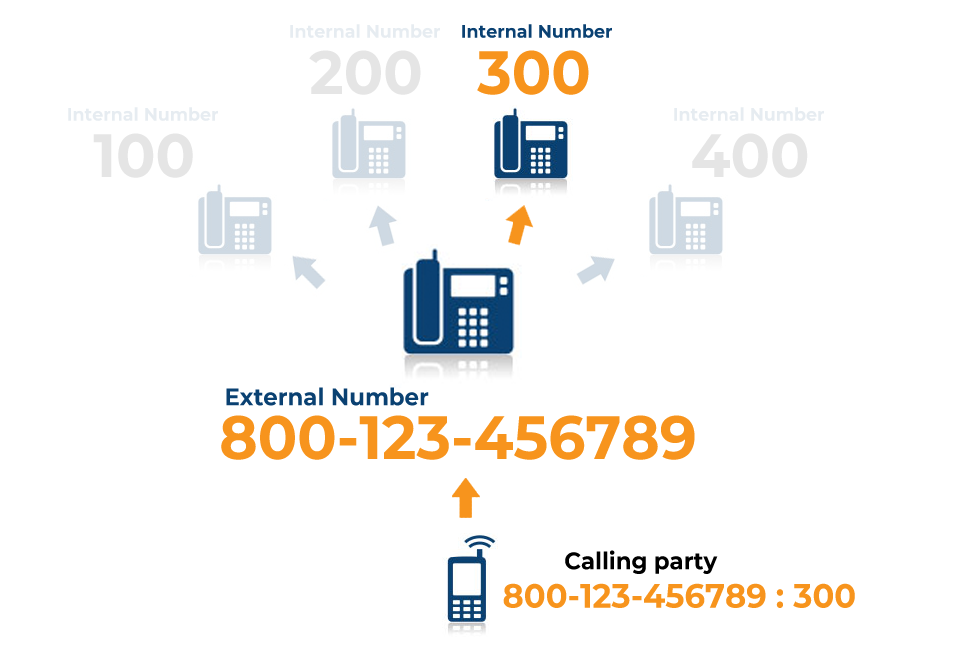
<style>
.page{position:relative;width:960px;height:660px;background:#ffffff}
.page>*{position:absolute;margin:0}
.t1{font:18.3px "Montserrat-Bold";color:#e6ecf1;scale:0.95 1}
.t2{font:18.3px "Montserrat-Bold";color:#0a4172;scale:0.95 1}
.t3{font:61.1px "Montserrat-Bold";color:#e5e5e5;scale:0.95 1}
.t4{font:61.1px "Montserrat-Bold";color:#f7941d;scale:0.95 1}
.t5{font:24px "Montserrat-Bold";color:#0a4172;scale:0.95 1}
.t6{font:24px "Montserrat-Bold";color:#000000;scale:0.95 1}
.t7{font:33.8px "Montserrat-Bold";color:#f7941d;scale:0.95 1}
</style>
<div class="page">
<p class="t1" style="left:290px;top:24px;width:150px;height:14px">Internal Number</p>
<p class="t2" style="left:462px;top:24px;width:150px;height:14px">Internal Number</p>
<p class="t3" style="left:309px;top:50px;width:112px;height:45px">200</p>
<p class="t4" style="left:477px;top:50px;width:112px;height:45px">300</p>
<p class="t1" style="left:68px;top:107px;width:150px;height:14px">Internal Number</p>
<p class="t1" style="left:674px;top:107px;width:150px;height:14px">Internal Number</p>
<p class="t3" style="left:93px;top:133px;width:100px;height:45px">100</p>
<p class="t3" style="left:692px;top:133px;width:116px;height:45px">400</p>
<p class="t5" style="left:226px;top:387px;width:203px;height:19px">External Number</p>
<p class="t4" style="left:221px;top:415px;width:474px;height:45px">800-123-456789</p>
<p class="t6" style="left:565px;top:550px;width:153px;height:24px">Calling party</p>
<p class="t7" style="left:503px;top:583px;width:352px;height:25px">800-123-456789 : 300</p>
</div>
